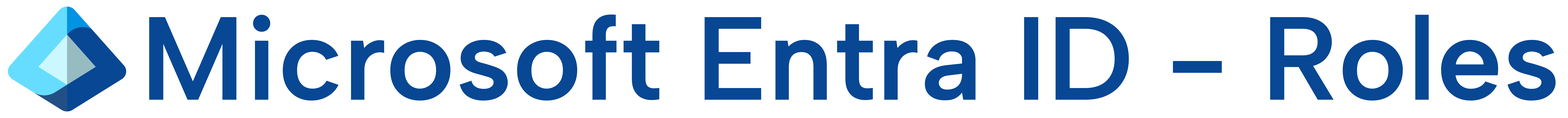
<style>
.page{position:relative;width:1568px;height:118px;background:#ffffff}
.page>*{position:absolute;margin:0}
.t1{font:118.3px "AlbertSans-SemiBold";color:#074793}
</style>
<div class="page">
<p class="t1" style="left:149px;top:14px;width:1407px;height:87px">Microsoft Entra ID - Roles</p>
</div>
